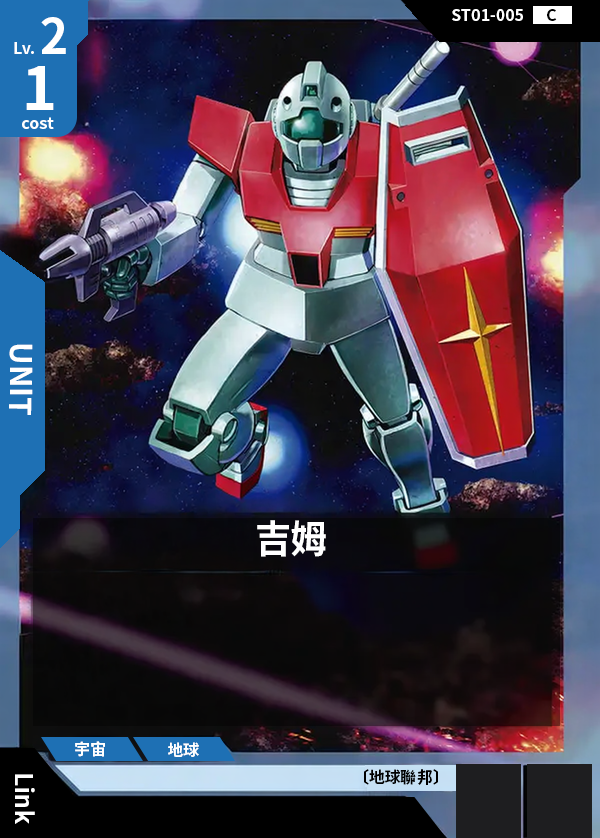
<style>
.page{position:relative;width:600px;height:838px}
.page>*{position:absolute;margin:0}
.t1{font:48px "NotoSansCJKtc-Bold";color:#ffffff}
.t2{font:16px "NotoSansCJKtc-Bold";color:#ffffff}
.t3{font:16px "NotoSansCJKtc-Bold";color:#000000}
.t4{font:60px "NotoSansCJKtc-Bold";color:#ffffff}
.t5{font:30px "NotoSansCJKtc-Bold";color:#ffffff}
.t6{font:38.4px "NotoSansCJKtc-Bold";color:#ffffff;scale:0.94 1}
.t7{font:24px "NotoSansCJKtc-Bold";color:#ffffff}
</style>
<div class="page">
<p class="t1" style="left:41px;top:17px;width:25px;height:37px">2</p>
<p class="t2" style="left:452px;top:9px;width:71px;height:12px">ST01-005</p>
<p class="t3" style="left:547px;top:9px;width:10px;height:12px">C</p>
<p class="t2" style="left:14px;top:42px;width:20px;height:12px">Lv.</p>
<p class="t4" style="left:26px;top:66px;width:28px;height:44px">1</p>
<p class="t2" style="left:22px;top:117px;width:32px;height:12px">cost</p>
<p class="t5" style="left:9px;top:344px;width:24px;height:71px;rotate:90deg">UNIT</p>
<p class="t6" style="left:257px;top:520px;width:69px;height:37px">吉姆</p>
<p class="t2" style="left:75px;top:741px;width:30px;height:16px">宇宙</p>
<p class="t2" style="left:168px;top:742px;width:31px;height:15px">地球</p>
<p class="t7" style="left:15px;top:774px;width:20px;height:50px;rotate:90deg">Link</p>
<p class="t3" style="left:364px;top:769px;width:74px;height:16px">〔地球聯邦〕</p>
</div>
